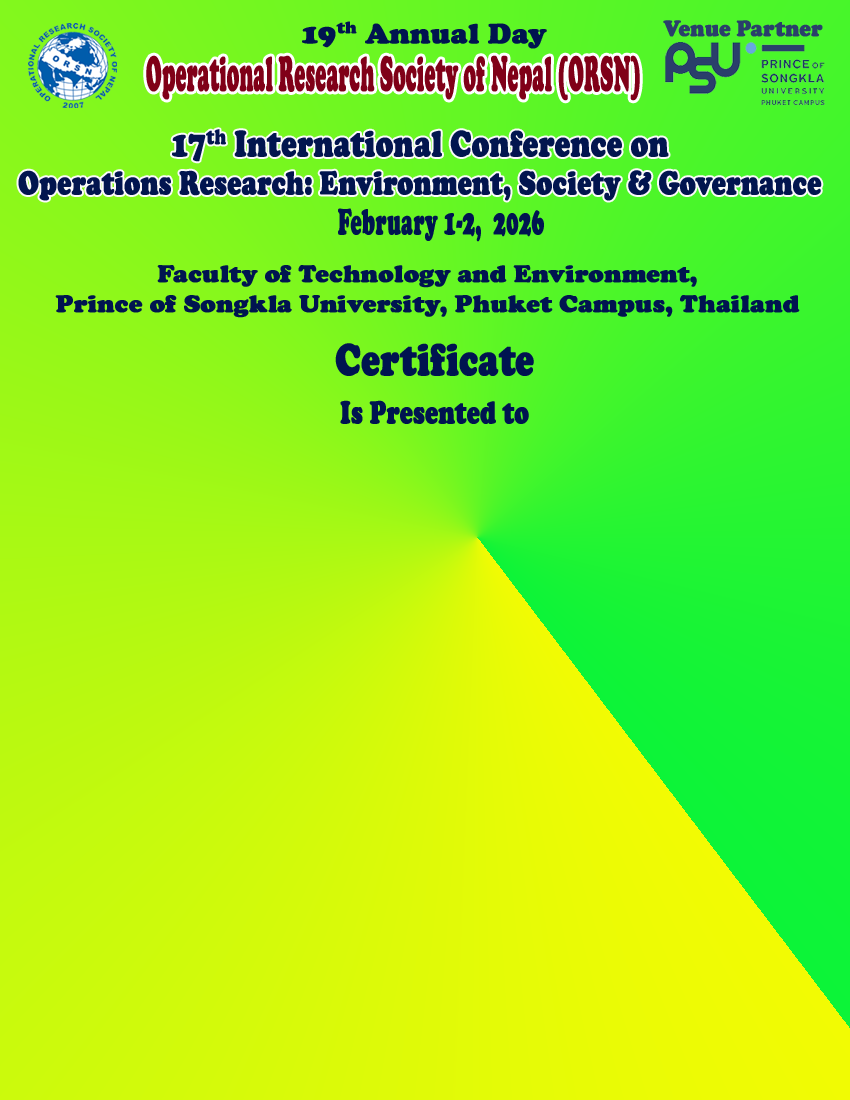
<style>
.page{position:relative;width:850px;height:1100px}
.page>*{position:absolute;margin:0}
.t1{font:29px "CooperBlack";color:#001450;font-weight:bold}
.t2{font:23.2px "CooperBlack";color:#2a3f6b;font-weight:bold;scale:0.89 1}
.t3{font:50.2px "CooperBlack";color:#800018;font-weight:bold;scale:0.4 1}
.t4{font:34.2px/37.4px "CooperBlack";color:#02154f;font-weight:bold;scale:0.76 1}
.t5{font:37.9px/37.4px "CooperBlack";color:#02154f;font-weight:bold;scale:0.76 1}
.t6{font:37.4px "CooperBlack";color:#001450;font-weight:bold;scale:0.54 1}
.t7{font:25px "CooperBlack";color:#001450;font-weight:bold}
.t8{font:32.5px "CooperBlack";color:#001450;font-weight:bold;scale:0.74 1}
.t9{font:47px "CooperBlack";color:#001450;font-weight:bold;scale:0.74 1}
</style>
<div class="page">
<p class="t1" style="left:302px;top:21px;width:245px;height:28px">19th Annual Day</p>
<p class="t2" style="left:663px;top:20px;width:160px;height:17px">Venue Partner</p>
<p class="t3" style="left:146px;top:55px;width:494px;height:46px">Operational Research Society of Nepal (ORSN)</p>
<p class="t4" style="left:18px;top:129px;width:804px;height:72px;text-align:center"><span class="t5">17th International Conference on<br></span>Operations Research: Environment, Society &amp; Governance</p>
<p class="t6" style="left:338px;top:208px;width:206px;height:34px">February 1-2,  2026</p>
<p class="t7" style="left:55px;top:265px;width:745px;height:53px;text-align:center">Faculty of Technology and Environment, <br>Prince of Songkla University, Phuket Campus, Thailand</p>
<p class="t8" style="left:335px;top:343px;width:199px;height:81px;text-align:center"><span class="t9">Certificate<br><br></span>Is Presented to</p>
</div>
